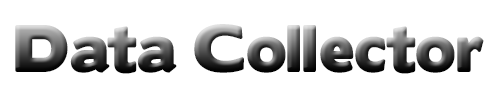
<style>
.page{position:relative;width:500px;height:100px;background:#ffffff}
.page>*{position:absolute;margin:0}
.t1{font:60px "BorisBlackBloxx"}
</style>
<div class="page">
<p class="t1" style="left:15px;top:24px;width:469px;height:50px">Data Collector</p>
</div>
